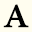
<style>
.page{position:relative;width:32px;height:32px;background:#fffdef}
.page>*{position:absolute;margin:0}
.t1{font:36.9px "AdobeGurmukhi-Bold";letter-spacing:-0.02em;color:#000000;scale:1.1 1}
</style>
<div class="page">
<p class="t1" style="left:3px;top:4px;width:26px;height:24px">A</p>
</div>
